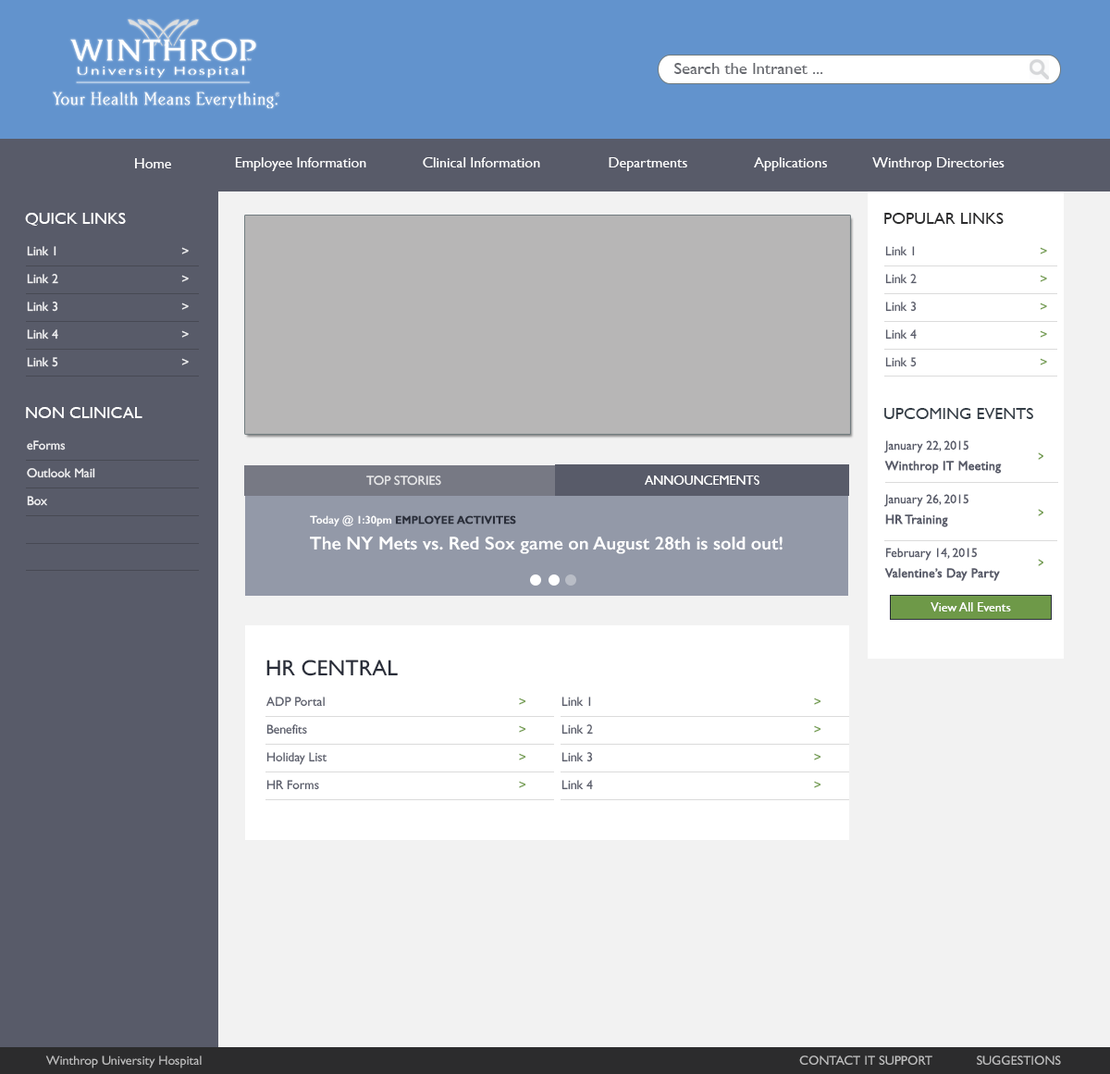
<style>
.page{position:relative;width:1110px;height:1074px;background:#f2f2f2}
.page>*{position:absolute;margin:0}
.t1{font:16.7px "GillSans";color:#696b71;scale:1.03 1}
.t2{font:14.8px "GillSans";color:#ffffff}
.t3{font:16.7px "GillSans";color:#ffffff;text-transform:uppercase}
.t4{font:16.7px "GillSans";color:#2c2c2d;text-transform:uppercase}
.t5{font:13px/27.8px "GillSans";color:#f2f2f4}
.t6{font:13px/27.8px "GillSans";color:#585b69}
.t7{font:13px/27.8px "GillSans";color:#6e9948}
.t8{font:16.7px "GillSans";color:#343d46;text-transform:uppercase}
.t9{font:13px/20.4px "GillSans";color:#585b69;font-weight:bold}
.t10{font:13px/20.4px "GillSans";color:#585b69}
.t11{font:13px/16.7px "GillSans";color:#585b69}
.t12{font:13px "GillSans";color:#ffffff;text-transform:uppercase}
.t13{font:18.5px/13px "GillSans-SemiBold";color:#ffffff}
.t14{font:11.1px/13px "GillSans-SemiBold";color:#ffffff}
.t15{font:11.1px/13px "GillSans-SemiBold";color:#292d39;font-weight:bold}
.t16{font:13px "GillSans";color:#ffffff}
.t17{font:22.2px "GillSans";color:#292d39;text-transform:uppercase}
.t18{font:13px "GillSans";color:#bebebe;text-transform:uppercase}
.t19{font:13px "GillSans";color:#bebebe}
</style>
<div class="page">
<p class="t1" style="left:674px;top:63px;width:149px;height:11px">Search the Intranet ...</p>
<p class="t2" style="left:135px;top:158px;width:36px;height:10px">Home</p>
<p class="t2" style="left:235px;top:157px;width:131px;height:14px">Employee Information</p>
<p class="t2" style="left:423px;top:157px;width:117px;height:10px">Clinical Information</p>
<p class="t2" style="left:609px;top:157px;width:78px;height:14px">Departments</p>
<p class="t2" style="left:754px;top:157px;width:73px;height:14px">Applications</p>
<p class="t2" style="left:872px;top:157px;width:133px;height:14px">Winthrop Directories</p>
<p class="t3" style="left:25px;top:213px;width:101px;height:13px">Quick Links</p>
<p class="t4" style="left:884px;top:213px;width:120px;height:11px">Popular Links</p>
<p class="t5" style="left:27px;top:246px;width:162px;height:121px">Link 1           &gt;<br>Link 2           &gt;<br>Link 3           &gt;<br>Link 4           &gt;<br>Link 5           &gt;</p>
<p class="t6" style="left:885px;top:246px;width:162px;height:121px">Link 1           <span class="t7">&gt;<br></span>Link 2           <span class="t7">&gt;<br></span>Link 3          <span class="t7"> &gt;<br></span>Link 4           <span class="t7">&gt;<br></span>Link 5           <span class="t7">&gt;</span></p>
<p class="t3" style="left:26px;top:407px;width:116px;height:11px">Non Clinical</p>
<p class="t8" style="left:884px;top:408px;width:149px;height:11px">Upcoming events</p>
<p class="t5" style="left:27px;top:440px;width:68px;height:66px">eForms<br>Outlook Mail   <br>Box</p>
<p class="t9" style="left:884px;top:440px;width:118px;height:141px"><span class="t10">January 22, 2015<br></span>Winthrop IT Meeting<br><br><span class="t11">January 26, 2015<br></span>HR Training<br><br><span class="t11">February 14, 2015<br></span>Valentine’s Day Party</p>
<p class="t12" style="left:366px;top:476px;width:75px;height:10px;opacity:0.8">TOP STORIES</p>
<p class="t12" style="left:645px;top:476px;width:115px;height:9px">announcements</p>
<p class="t13" style="left:310px;top:515px;width:473px;height:39px"><span class="t14">   Today @ 1:30pm </span><span class="t15">EMPLOYEE ACTIVITES<br> <br></span>The NY Mets vs. Red Sox game on August 28th is sold out!</p>
<p class="t16" style="left:931px;top:602px;width:80px;height:10px">View All Events</p>
<p class="t17" style="left:266px;top:660px;width:132px;height:16px">HR Central</p>
<p class="t6" style="left:266px;top:697px;width:260px;height:93px">ADP Portal             <span class="t7">&gt;<br></span>Benefits             <span class="t7">&gt;<br></span>Holiday List            <span class="t7"> &gt;<br></span>HR Forms             <span class="t7">&gt;</span></p>
<p class="t6" style="left:562px;top:697px;width:260px;height:93px">Link 1              <span class="t7">&gt;<br></span>Link 2              <span class="t7">&gt;<br></span>Link 3             <span class="t7"> &gt;<br></span>Link 4              <span class="t7">&gt;</span></p>
<p class="t18" style="left:45px;top:1056px;width:1016px;height:13px"><span class="t19"><br>     Winthrop University Hospital                </span>      Contact IT Support    Suggestions</p>
</div>
